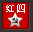
<style>
.page{position:relative;width:33px;height:32px;background:#c50000}
.page>*{position:absolute;margin:0}
.t1{font:10.4px "SimSun";color:#ffffff}
</style>
<div class="page">
<p class="t1" style="left:6px;top:4px;width:19px;height:9px">红四</p>
</div>
